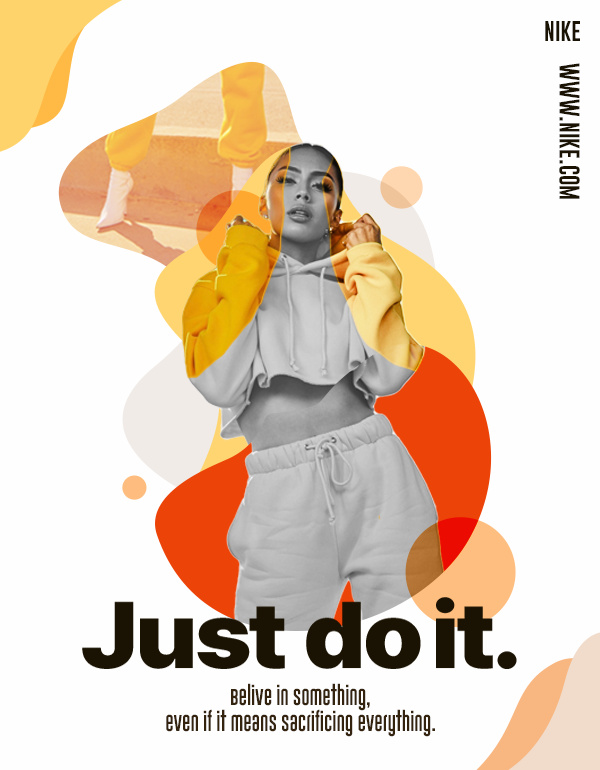
<style>
.page{position:relative;width:600px;height:770px;background:#fefefe}
.page>*{position:absolute;margin:0}
.t1{font:20.8px "GoboldUplow";color:#1a1202}
.t2{font:16.7px/26.4px "GoboldUplow";color:#34230f}
</style>
<div class="page">
<p class="t1" style="left:545px;top:21px;width:35px;height:20px">NIKE</p>
<p class="t1" style="left:559px;top:63px;width:21px;height:136px;rotate:90deg">WWW.NIKE.COM</p>
<p class="t2" style="left:166px;top:683px;width:269px;height:54px;text-align:center">Belive in something,<br>even if it means sacrificing everything.</p>
</div>
